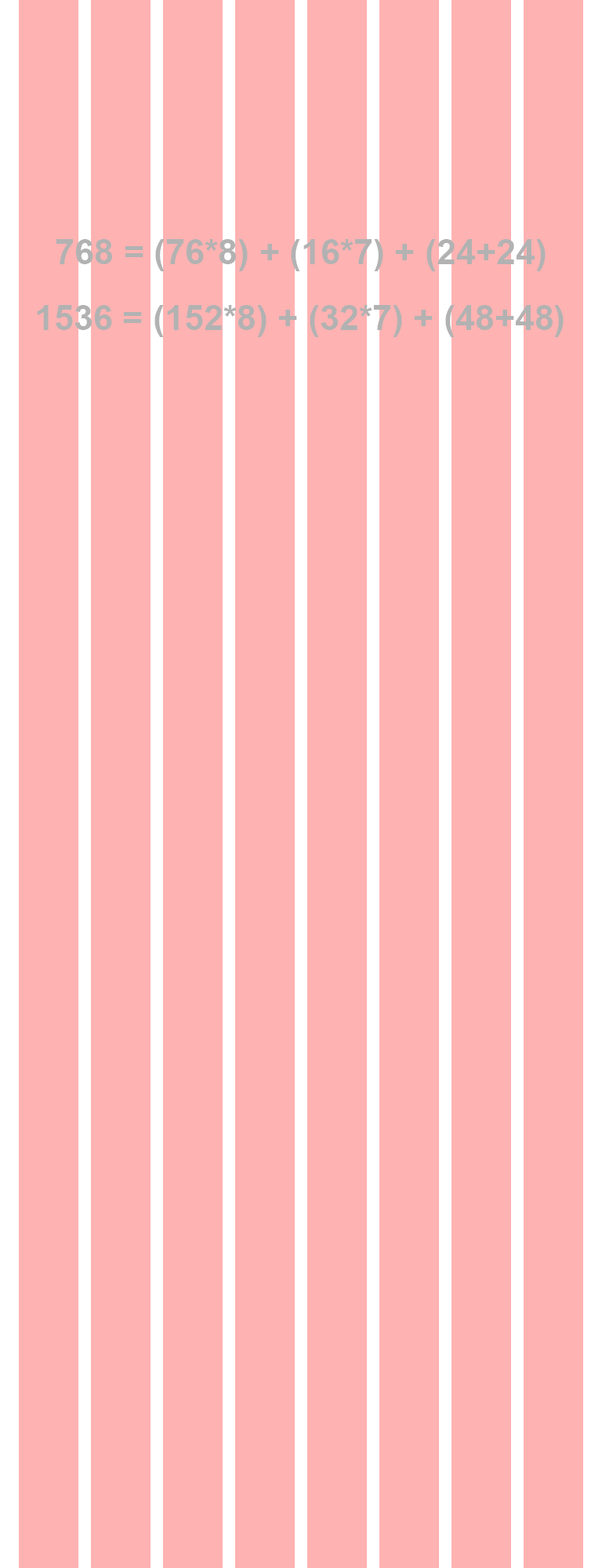
<style>
.page{position:relative;width:602px;height:1568px;background:#ffb2b2}
.page>*{position:absolute;margin:0}
.t1{font:35.1px "Arial-BoldMT";color:#b2b2b2}
</style>
<div class="page">
<p class="t1" style="left:56px;top:239px;width:490px;height:32px">768 = (76*8) + (16*7) + (24+24)</p>
<p class="t1" style="left:37px;top:305px;width:527px;height:32px">1536 = (152*8) + (32*7) + (48+48)</p>
</div>
